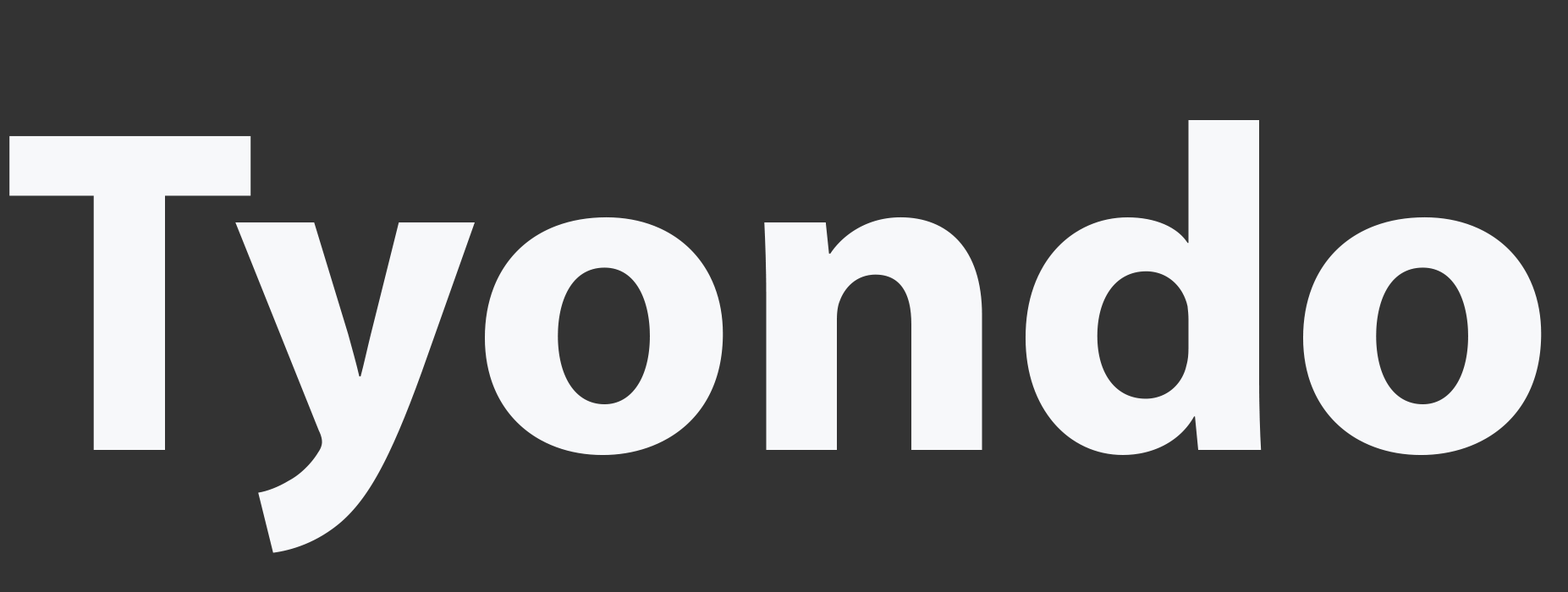
<style>
.page{position:relative;width:1568px;height:592px;background:#333333}
.page>*{position:absolute;margin:0}
.t1{font:465.4px "MyriadPro-Bold";color:#f7f8fa}
</style>
<div class="page">
<p class="t1" style="left:9px;top:120px;width:1533px;height:433px">Tyondo</p>
</div>
